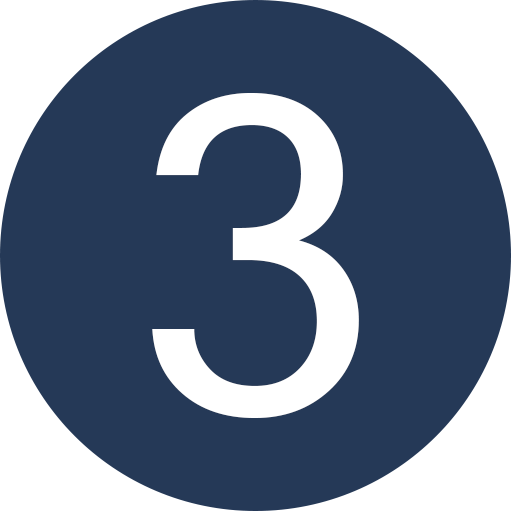
<style>
.page{position:relative;width:512px;height:512px;background:#253957}
.page>*{position:absolute;margin:0}
.t1{font:440px "MicrosoftSansSerif";color:#ffffff}
</style>
<div class="page">
<p class="t1" style="left:152px;top:93px;width:207px;height:325px">3</p>
</div>
